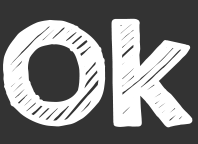
<style>
.page{position:relative;width:198px;height:144px;background:#333333}
.page>*{position:absolute;margin:0}
.t1{font:125px "KGSecondChancesSketch";color:#ffffff;font-weight:bold}
</style>
<div class="page">
<p class="t1" style="left:3px;top:18px;width:190px;height:110px">Ok</p>
</div>
